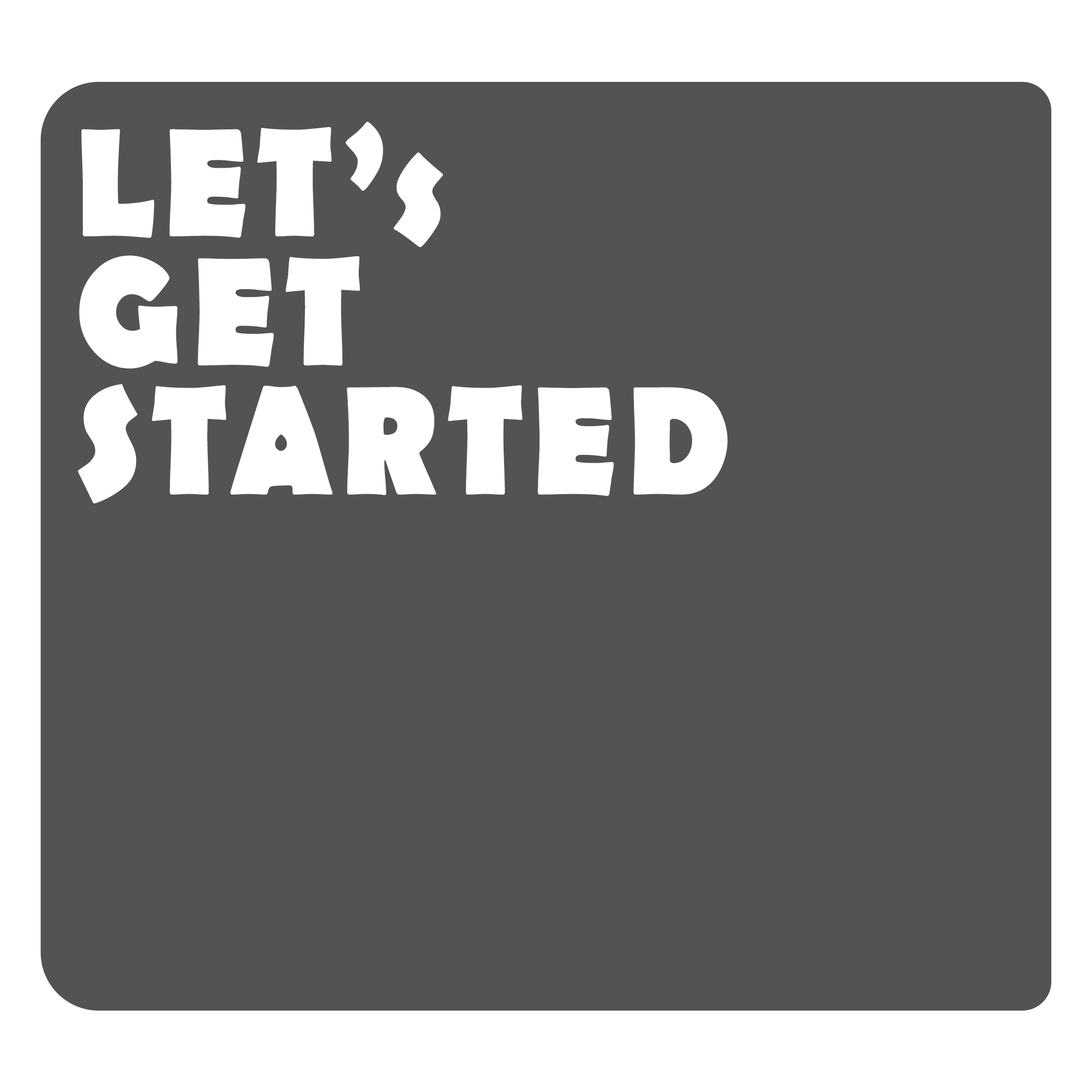
<style>
.page{position:relative;width:1092px;height:1092px;background:#555252}
.page>*{position:absolute;margin:0}
.t1{font:156.1px/129.1px "BerlinSansFB-Bold";letter-spacing:0.075em;color:#ffffff;scale:0.9 1}
</style>
<div class="page">
<p class="t1" style="left:77px;top:122px;width:651px;height:381px">LET’s <br>GET<br>STARTED</p>
</div>
